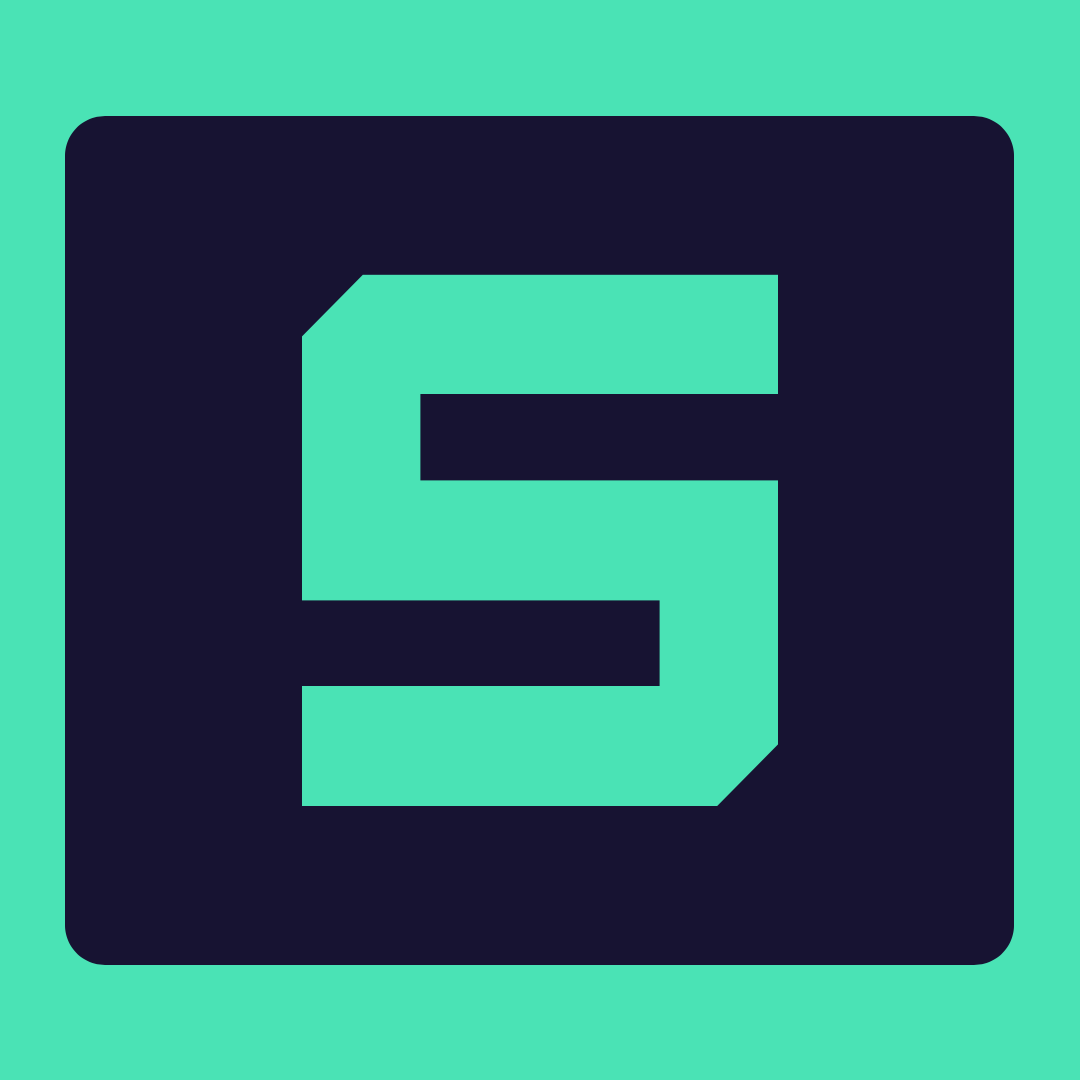
<style>
.page{position:relative;width:1080px;height:1080px;background:#171332}
.page>*{position:absolute;margin:0}
.t1{font:800px "Loaded";color:#4ae3b5}
</style>
<div class="page">
<p class="t1" style="left:302px;top:274px;width:476px;height:532px">S</p>
</div>
